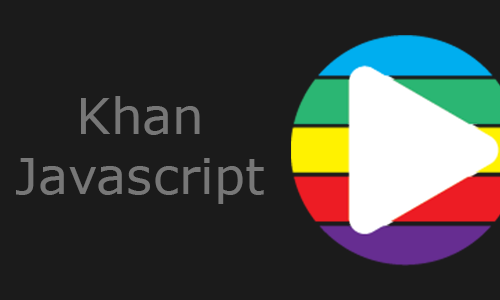
<style>
.page{position:relative;width:500px;height:300px;background:#1b1b1b}
.page>*{position:absolute;margin:0}
.t1{font:50px "Verdana";color:#777777}
</style>
<div class="page">
<p class="t1" style="left:16px;top:96px;width:248px;height:108px;text-align:center">Khan<br>Javascript</p>
</div>
